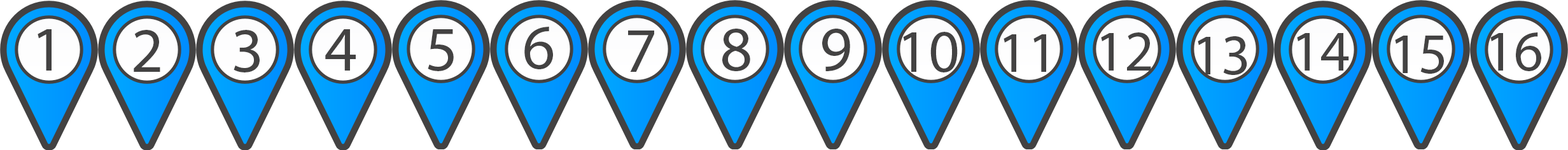
<style>
.page{position:relative;width:1568px;height:150px;background:#ffffff}
.page>*{position:absolute;margin:0}
.t1{font:63.6px "MyriadPro-Regular";color:#434242}
.t2{font:60.5px "MyriadPro-Regular";color:#434242}
.t3{font:57.3px "MyriadPro-Regular";color:#434242}
</style>
<div class="page">
<p class="t1" style="left:38px;top:29px;width:14px;height:42px">1</p>
<p class="t1" style="left:134px;top:30px;width:126px;height:43px">2     3</p>
<p class="t1" style="left:325px;top:29px;width:31px;height:42px">4</p>
<p class="t1" style="left:428px;top:29px;width:26px;height:42px">5</p>
<p class="t1" style="left:524px;top:27px;width:29px;height:42px">6</p>
<p class="t1" style="left:722px;top:29px;width:28px;height:42px">8</p>
<p class="t1" style="left:822px;top:29px;width:28px;height:42px">9</p>
<p class="t1" style="left:628px;top:31px;width:26px;height:41px">7</p>
<p class="t2" style="left:903px;top:32px;width:55px;height:41px">10</p>
<p class="t3" style="left:1004px;top:34px;width:42px;height:38px">11</p>
<p class="t3" style="left:1101px;top:32px;width:50px;height:39px">12</p>
<p class="t3" style="left:1198px;top:36px;width:49px;height:39px">13</p>
<p class="t3" style="left:1297px;top:33px;width:52px;height:38px">14</p>
<p class="t3" style="left:1395px;top:36px;width:49px;height:38px">15</p>
<p class="t3" style="left:1490px;top:32px;width:51px;height:39px">16</p>
</div>
